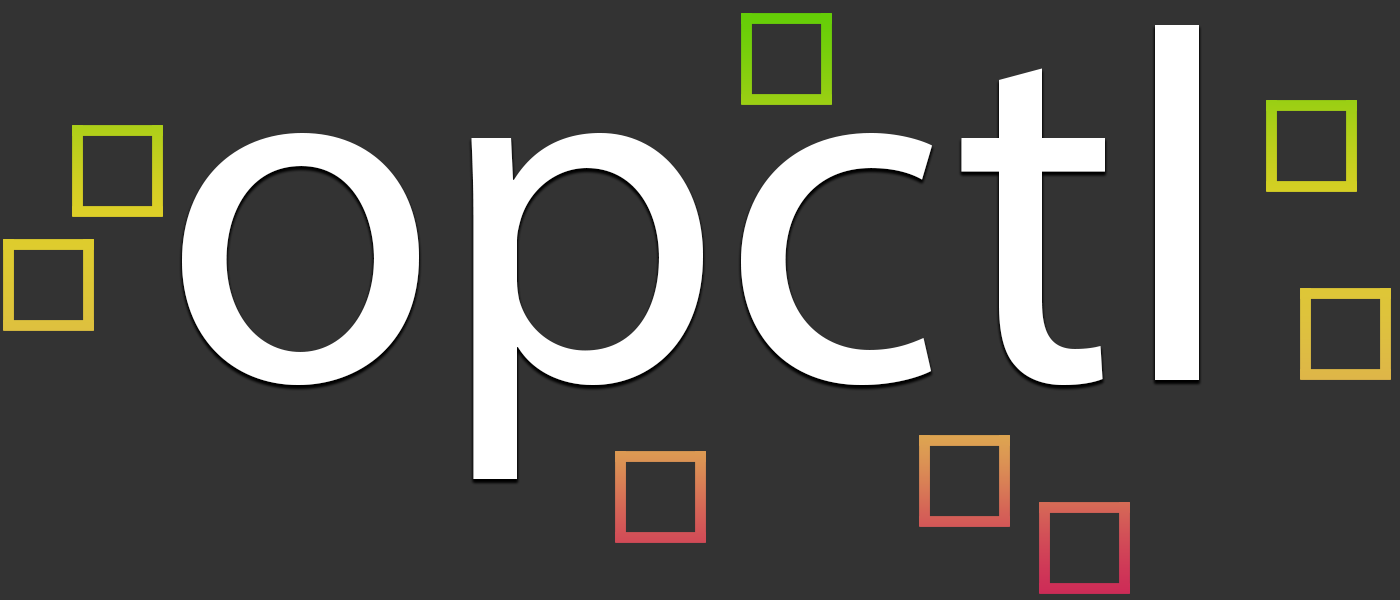
<style>
.page{position:relative;width:1400px;height:600px;background:#333333}
.page>*{position:absolute;margin:0}
.t1{font:500px "MyriadPro-Regular";color:#ffffff}
</style>
<div class="page">
<p class="t1" style="left:182px;top:25px;width:1017px;height:454px">opctl</p>
</div>
